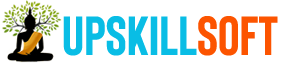
<style>
.page{position:relative;width:292px;height:63px;background:#ffffff}
.page>*{position:absolute;margin:0}
.t1{font:55px "Bison-Bold";color:#09bde5}
.t2{font:55px "Bison-Bold";color:#fc5400}
</style>
<div class="page">
<p class="t1" style="left:63px;top:16px;width:215px;height:40px">UPSKILL<span class="t2">SOFT</span></p>
</div>
